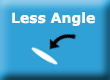
<style>
.page{position:relative;width:110px;height:80px;background:#2fa1d7}
.page>*{position:absolute;margin:0}
.t1{font:14px "Verdana-Bold";color:#ffffff}
</style>
<div class="page">
<p class="t1" style="left:12px;top:12px;width:83px;height:14px">Less Angle</p>
</div>
